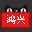
<style>
.page{position:relative;width:32px;height:32px;background:#333333}
.page>*{position:absolute;margin:0}
.t1{font:10px "SimHei";color:#fcfcfc}
</style>
<div class="page">
<p class="t1" style="left:7px;top:15px;width:18px;height:9px">鸿兴</p>
</div>
